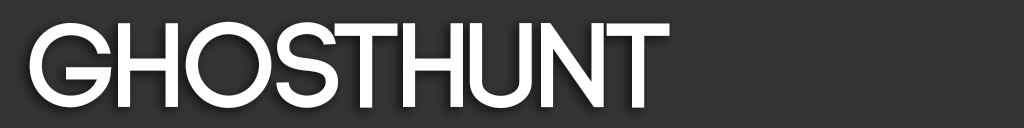
<style>
.page{position:relative;width:1024px;height:128px;background:#333333}
.page>*{position:absolute;margin:0}
.t1{font:119.9px "Code-Bold";color:#ffffff}
</style>
<div class="page">
<p class="t1" style="left:29px;top:21px;width:641px;height:87px">GHOSTHUNT</p>
</div>
